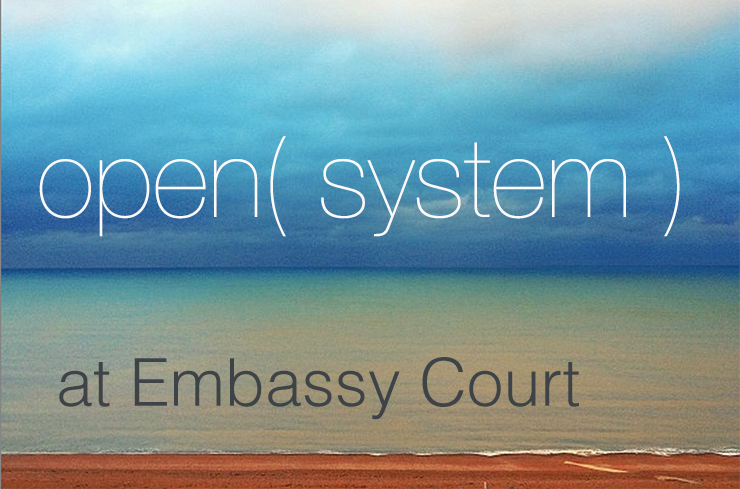
<style>
.page{position:relative;width:740px;height:489px}
.page>*{position:absolute;margin:0}
.t1{font:110px "HelveticaNeue-UltraLight";color:#fbfafb}
.t2{font:66px "Helvetica-Light";color:#3e4348}
</style>
<div class="page">
<p class="t1" style="left:39px;top:136px;width:641px;height:101px">open( system )</p>
<p class="t2" style="left:59px;top:357px;width:520px;height:63px">at Embassy Court</p>
</div>
